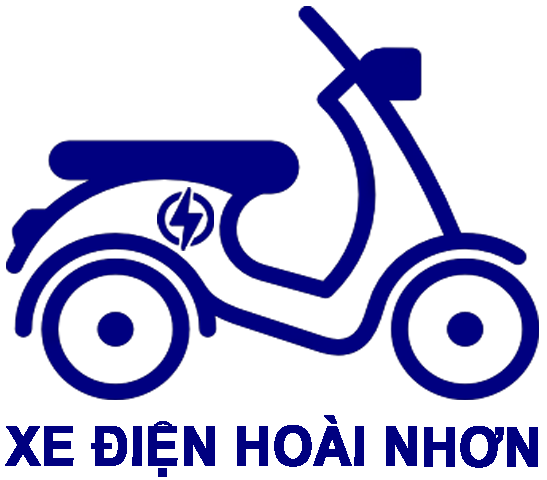
<style>
.page{position:relative;width:547px;height:480px;background:#ffffff}
.page>*{position:absolute;margin:0}
.t1{font:54.7px "Arial-BoldMT";color:#000080;font-weight:bold;scale:0.93 1}
</style>
<div class="page">
<p class="t1" style="left:5px;top:415px;width:533px;height:62px">XE ĐIỆN HOÀI NHƠN</p>
</div>
